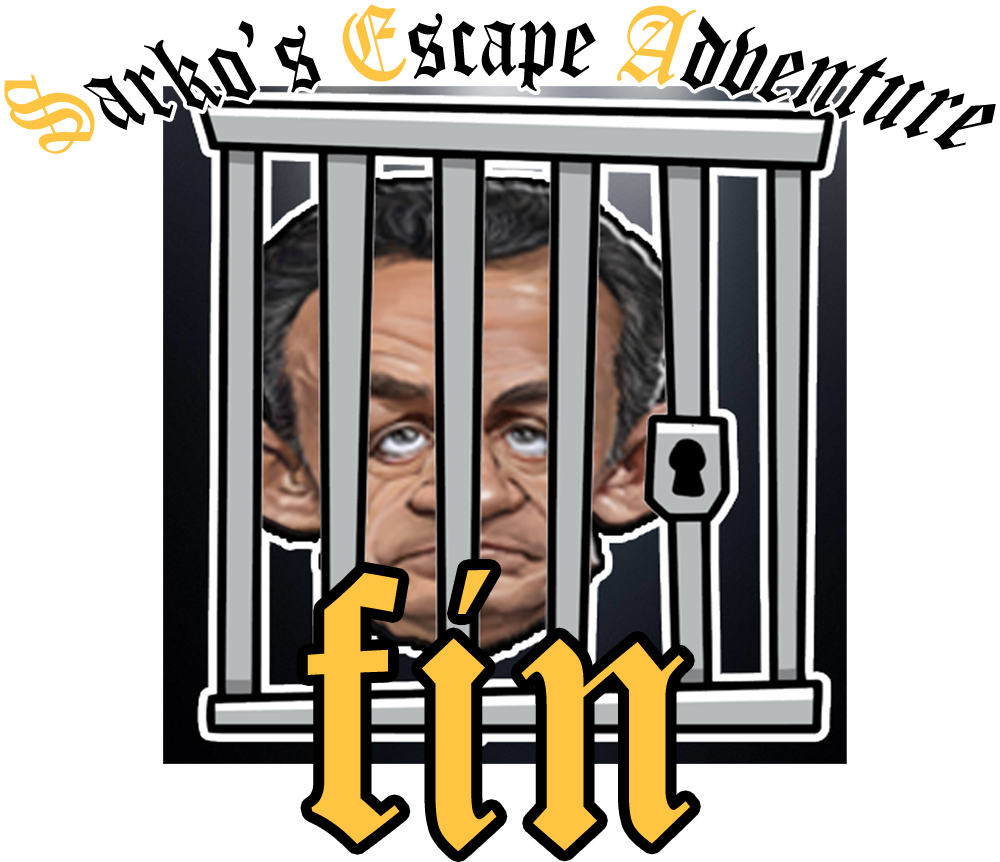
<style>
.page{position:relative;width:1000px;height:862px;background:#ffffff}
.page>*{position:absolute;margin:0}
.t1{font:88.2px/72.7px "OldEnglishTextMT";letter-spacing:0.01em;color:#000000}
.t2{font:88.2px/72.7px "OldEnglishTextMT";letter-spacing:0.01em;color:#ffc442}
.t3{font:363.3px "OldEnglishTextMT";letter-spacing:0.01em;color:#ffc442}
</style>
<div class="page">
<p class="t1" style="left:4px;top:4px;width:992px;height:150px"><span class="t2">S</span>arko’s <span class="t2">E</span>scape <span class="t2">A</span>dventure</p>
<p class="t3" style="left:307px;top:570px;width:383px;height:282px">fin</p>
</div>
